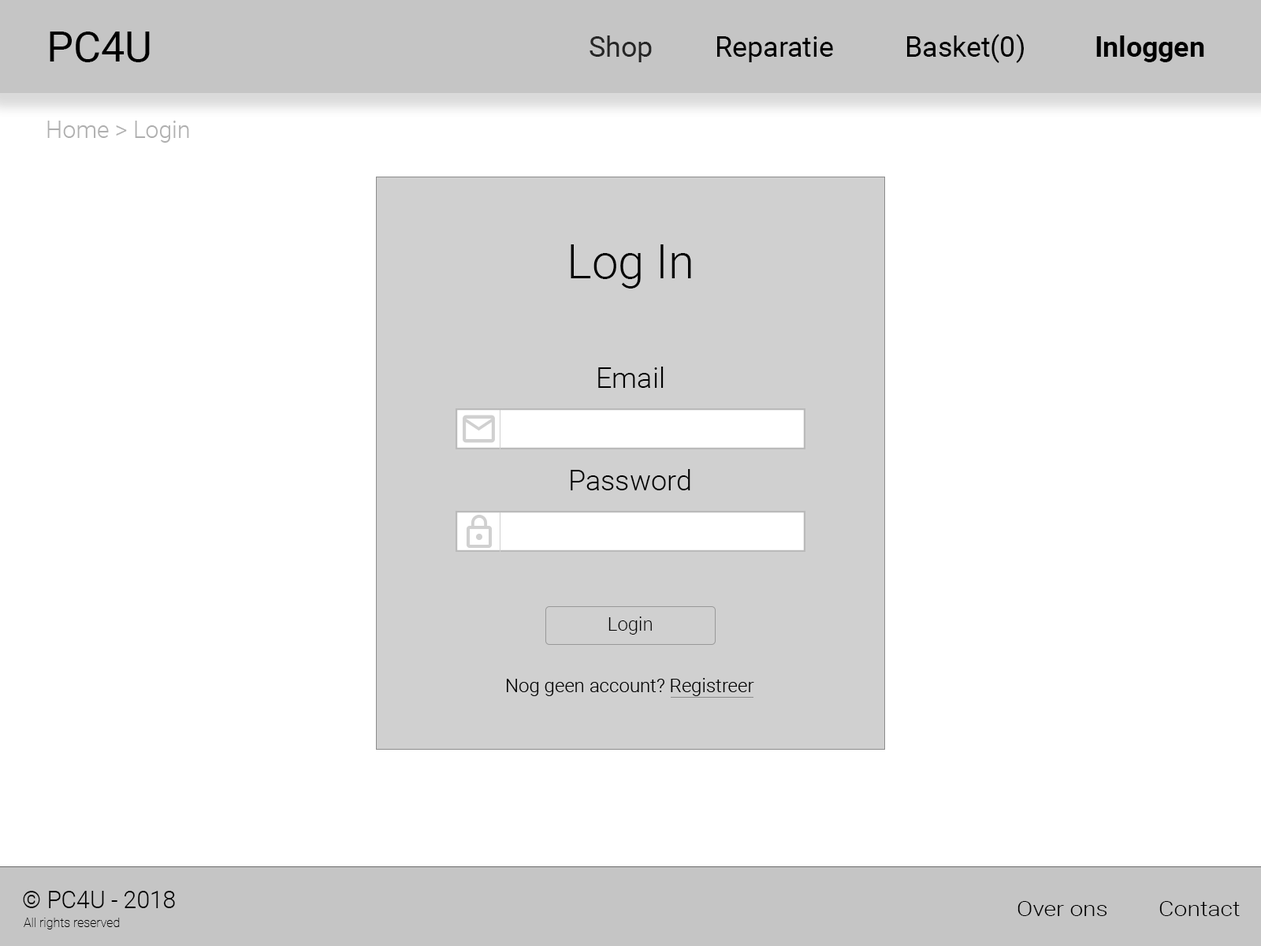
<style>
.page{position:relative;width:1261px;height:946px;background:#ffffff}
.page>*{position:absolute;margin:0}
.t1{font:42.1px "Roboto-Regular";color:#000000}
.t2{font:28px "Roboto-Regular";color:#000000}
.t3{font:28px "Roboto-Regular";color:#262626}
.t4{font:28px "Roboto-Bold";color:#000000}
.t5{font:23.7px "Roboto-Light";color:#afafaf}
.t6{font:47.3px "Roboto-Light";color:#000000}
.t7{font:28.4px "Roboto-Light";color:#000000}
.t8{font:18.9px "Roboto-Light";color:#000000}
.t9{font:23.6px "Roboto-Light";color:#000000}
.t10{font:20.4px "Roboto-Light";color:#000000;scale:1.16 1}
.t11{font:12.6px "Roboto-Thin";color:#000000}
</style>
<div class="page">
<p class="t1" style="left:50px;top:32px;width:100px;height:30px">PC4U</p>
<p class="t2" style="left:589px;top:34px;width:615px;height:29px"><span class="t3">Shop</span>  Reparatie   Basket(0)   <span class="t4">Inloggen</span></p>
<p class="t5" style="left:47px;top:121px;width:142px;height:22px">Home &gt; Login</p>
<p class="t6" style="left:571px;top:244px;width:120px;height:44px">Log In</p>
<p class="t7" style="left:598px;top:366px;width:66px;height:22px">Email</p>
<p class="t7" style="left:571px;top:469px;width:119px;height:21px">Password</p>
<p class="t8" style="left:608px;top:616px;width:44px;height:18px">Login</p>
<p class="t9" style="left:23px;top:891px;width:152px;height:17px">© PC4U - 2018</p>
<p class="t10" style="left:1017px;top:901px;width:223px;height:15px">Over ons  Contact</p>
<p class="t11" style="left:24px;top:917px;width:96px;height:12px">All rights reserved</p>
</div>
